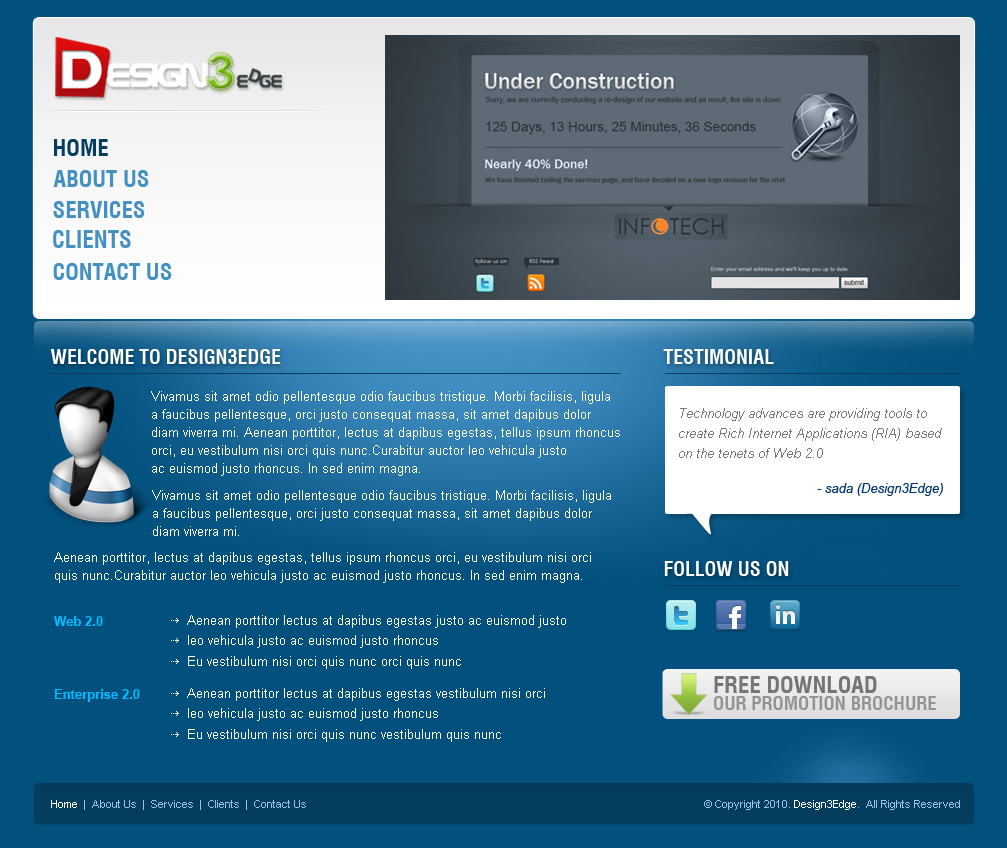
<style>
.page{position:relative;width:1007px;height:848px;background:#02507d}
.page>*{position:absolute;margin:0}
.t1{font:23.1px "Swiss721BT-BoldCondensedDType";color:#053d5e}
.t2{font:23.1px "Swiss721BT-BoldCondensedDType";color:#4390c3}
.t3{font:23.3px "Swiss721BT-BoldCondensedDType";color:#4390c3}
.t4{font:20px "Swiss721BT-BoldCondensedDType";color:#ffffff}
.t5{font:13px/6px "ArialMT";color:#ffffff}
.t6{font:13px/8px "Arial-ItalicMT";color:#777777}
.t7{font:13px "Arial-ItalicMT";color:#003770}
.t8{font:13px "Arial-BoldMT";color:#00baff}
.t9{font:13px "ArialMT";color:#ffffff}
.t10{font:23.2px "Swiss721BT-BoldCondensedDType";color:#747474}
.t11{font:19px "Swiss721BT-BoldCondensedDType";color:#929292}
.t12{font:11px "ArialMT";color:#9bc2e1}
.t13{font:11px "ArialMT";color:#ffffff}
.t14{font:11px "ArialMT";color:#9cc3e2}
</style>
<div class="page">
<p class="t1" style="left:54px;top:139px;width:54px;height:17px">home</p>
<p class="t2" style="left:53px;top:170px;width:96px;height:17px">ABOUT US</p>
<p class="t2" style="left:53px;top:201px;width:92px;height:17px">SERVICES</p>
<p class="t3" style="left:53px;top:230px;width:78px;height:18px">clients</p>
<p class="t2" style="left:53px;top:263px;width:119px;height:17px">contact us</p>
<p class="t4" style="left:50px;top:349px;width:231px;height:15px">welcome to Design3Edge</p>
<p class="t4" style="left:663px;top:349px;width:111px;height:15px">testimonial</p>
<p class="t5" style="left:151px;top:391px;width:469px;height:85px">Vivamus sit amet odio pellentesque odio faucibus tristique. Morbi facilisis, ligula <br>a faucibus pellentesque, orci justo consequat massa, sit amet dapibus dolor <br>diam viverra mi. Aenean porttitor, lectus at dapibus egestas, tellus ipsum rhoncus <br>orci, eu vestibulum nisi orci quis nunc.Curabitur auctor leo vehicula justo <br>ac euismod justo rhoncus. In sed enim magna.</p>
<p class="t6" style="left:679px;top:408px;width:263px;height:50px">Technology advances are providing tools to <br>create Rich Internet Applications (RIA) based <br>on the tenets of Web 2.0</p>
<p class="t7" style="left:817px;top:483px;width:126px;height:13px">- sada (Design3Edge)</p>
<p class="t5" style="left:152px;top:490px;width:459px;height:46px">Vivamus sit amet odio pellentesque odio faucibus tristique. Morbi facilisis, ligula <br>a faucibus pellentesque, orci justo consequat massa, sit amet dapibus dolor <br>diam viverra mi.</p>
<p class="t5" style="left:54px;top:552px;width:537px;height:31px">Aenean porttitor, lectus at dapibus egestas, tellus ipsum rhoncus orci, eu vestibulum nisi orci <br>quis nunc.Curabitur auctor leo vehicula justo ac euismod justo rhoncus. In sed enim magna.</p>
<p class="t4" style="left:664px;top:561px;width:125px;height:15px">follow us on</p>
<p class="t8" style="left:54px;top:616px;width:49px;height:10px">Web 2.0</p>
<p class="t9" style="left:187px;top:615px;width:379px;height:13px">Aenean porttitor lectus at dapibus egestas justo ac euismod justo</p>
<p class="t9" style="left:188px;top:635px;width:250px;height:13px">leo vehicula justo ac euismod justo rhoncus</p>
<p class="t9" style="left:188px;top:656px;width:273px;height:13px">Eu vestibulum nisi orci quis nunc orci quis nunc</p>
<p class="t10" style="left:714px;top:676px;width:163px;height:17px">FREE DOWNLOAD</p>
<p class="t8" style="left:54px;top:689px;width:86px;height:13px">Enterprise 2.0</p>
<p class="t9" style="left:187px;top:688px;width:358px;height:13px">Aenean porttitor lectus at dapibus egestas vestibulum nisi orci</p>
<p class="t11" style="left:714px;top:696px;width:222px;height:14px">our promotion brochure</p>
<p class="t9" style="left:188px;top:708px;width:250px;height:13px">leo vehicula justo ac euismod justo rhoncus</p>
<p class="t9" style="left:188px;top:729px;width:313px;height:13px">Eu vestibulum nisi orci quis nunc vestibulum quis nunc</p>
<p class="t12" style="left:51px;top:800px;width:255px;height:10px"><span class="t13">Home</span>  |  About Us  |  Services  |  Clients  |  Contact Us</p>
<p class="t14" style="left:704px;top:800px;width:256px;height:10px">© Copyright 2010. <span class="t13">Design3Edge</span>.  All Rights Reserved</p>
</div>
